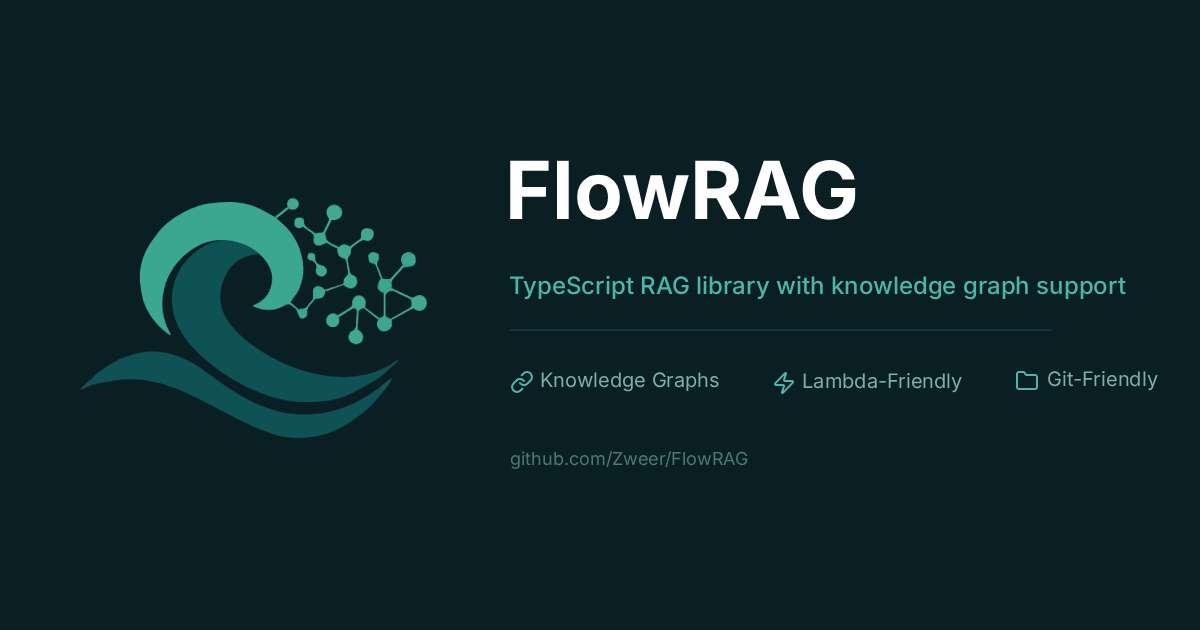
<style>
.page{position:relative;width:1200px;height:630px;background:#0a1f23}
.page>*{position:absolute;margin:0}
.t1{font:80px "Inter-Bold";color:#ffffff}
.t2{font:24px "Inter-Medium";color:#4db6ac}
.t3{font:20px "Inter-Regular";color:#7fafa8}
.t4{font:18px "Inter-Regular";color:#4a7a76}
</style>
<div class="page">
<p class="t1" style="left:510px;top:160px;width:346px;height:60px">FlowRAG</p>
<p class="t2" style="left:510px;top:275px;width:616px;height:25px">TypeScript RAG library with knowledge graph support</p>
<p class="t3" style="left:541px;top:372px;width:178px;height:20px">Knowledge Graphs</p>
<p class="t3" style="left:803px;top:373px;width:159px;height:20px">Lambda-Friendly</p>
<p class="t3" style="left:1048px;top:370px;width:110px;height:21px">Git-Friendly</p>
<p class="t4" style="left:510px;top:451px;width:238px;height:18px">github.com/Zweer/FlowRAG</p>
</div>
